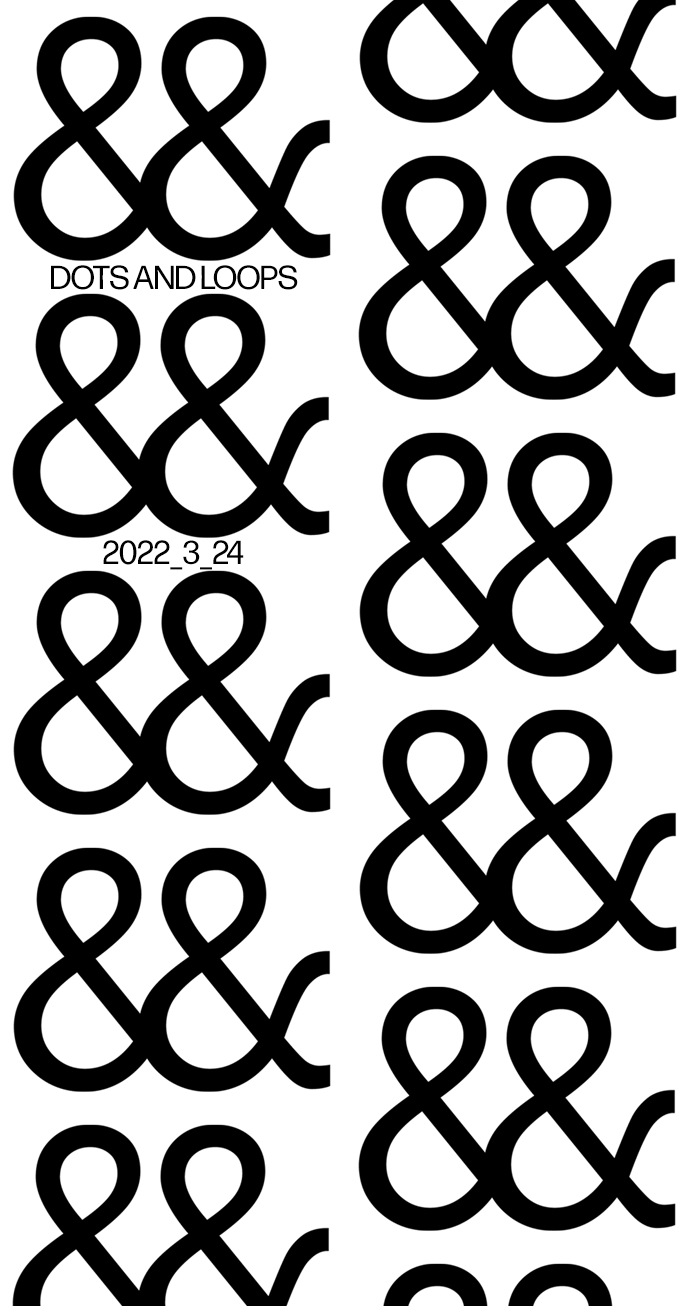
<style>
.page{position:relative;width:688px;height:1306px;background:#ffffff}
.page>*{position:absolute;margin:0}
.t1{font:33.3px "FormaDJRDisplay-Regular";color:#000000;text-transform:uppercase}
</style>
<div class="page">
<p class="t1" style="left:51px;top:265px;width:247px;height:25px">dots and loops</p>
<p class="t1" style="left:103px;top:540px;width:141px;height:30px">2022_3_24</p>
</div>
